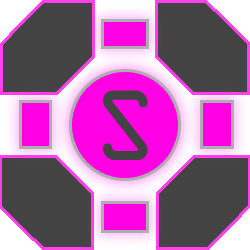
<style>
.page{position:relative;width:250px;height:250px;background:#444343}
.page>*{position:absolute;margin:0}
.t1{font:106.7px "OCRAExtended";letter-spacing:0.01em;color:#444343}
</style>
<div class="page">
<p class="t1" style="left:103px;top:90px;width:45px;height:70px">S</p>
</div>
